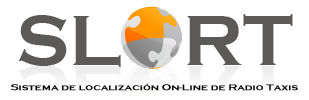
<style>
.page{position:relative;width:309px;height:100px;background:#ffffff}
.page>*{position:absolute;margin:0}
.t1{font:8.7px "CopperplateGothic-Bold";color:#000000;scale:1.26 1}
.t2{font:7.9px "CopperplateGothic-Bold";color:#000000;scale:1.26 1}
</style>
<div class="page">
<p class="t1" style="left:11px;top:83px;width:287px;height:8px"><span class="t2"><br></span>Sistema de localización On-Line de Radio Taxis</p>
</div>
